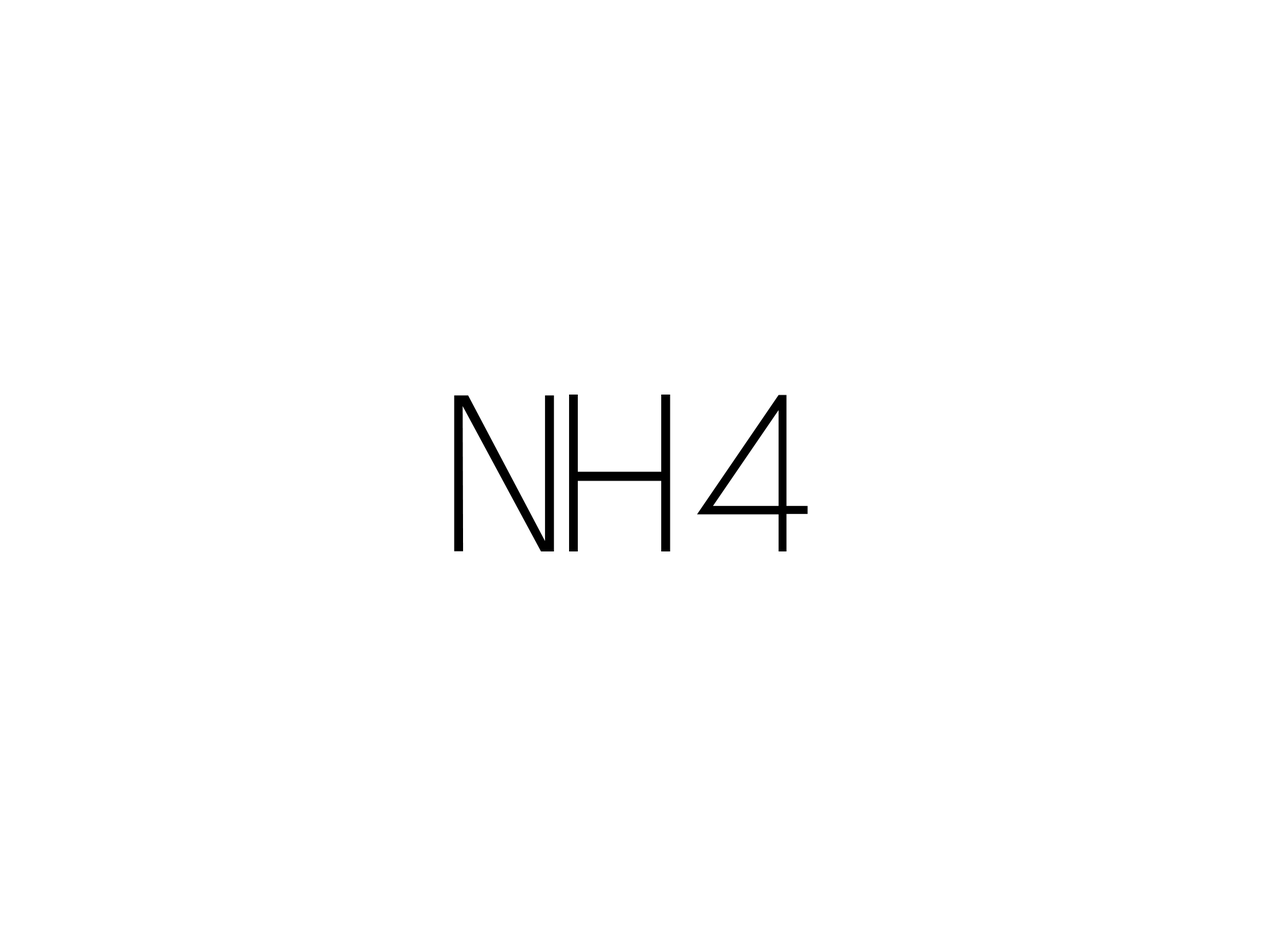
<style>
.page{position:relative;width:1261px;height:946px;background:#ffffff}
.page>*{position:absolute;margin:0}
.t1{font:222.4px "Alcubierre";color:#000000;scale:0.95 1}
</style>
<div class="page">
<p class="t1" style="left:454px;top:394px;width:354px;height:157px">NH4</p>
</div>
